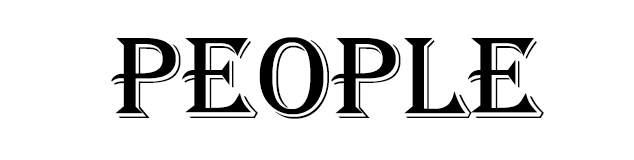
<style>
.page{position:relative;width:634px;height:160px;background:#ffffff}
.page>*{position:absolute;margin:0}
.t1{font:120px "Algerian";color:#000000}
</style>
<div class="page">
<p class="t1" style="left:111px;top:37px;width:433px;height:82px">People</p>
</div>
